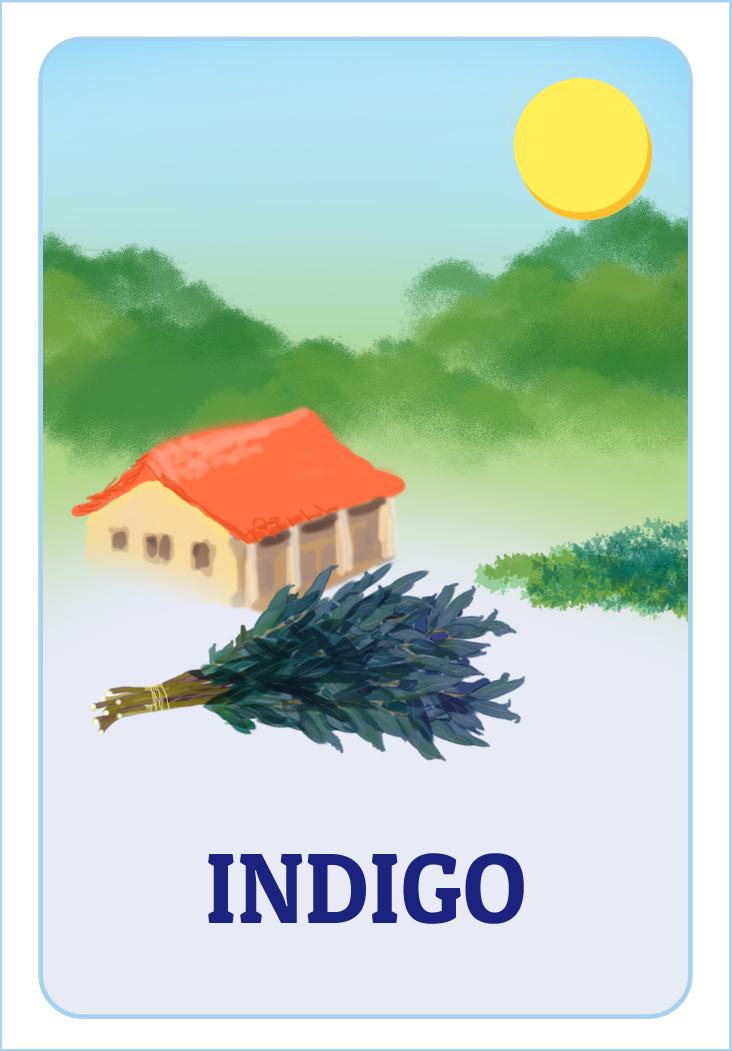
<style>
.page{position:relative;width:732px;height:1051px;background:#e8eaf6}
.page>*{position:absolute;margin:0}
.t1{font:100px "PatuaOne-Regular";color:#1a237e}
</style>
<div class="page">
<p class="t1" style="left:208px;top:853px;width:316px;height:71px">INDIGO</p>
</div>
